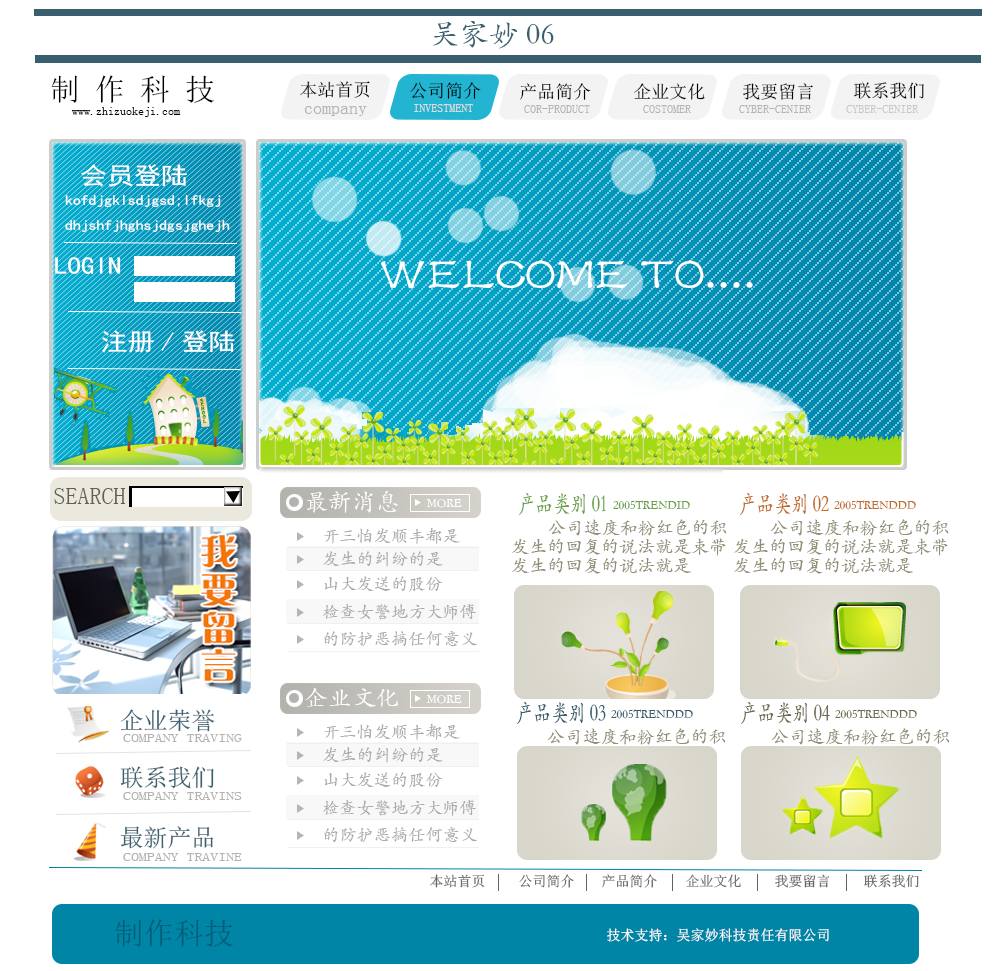
<style>
.page{position:relative;width:1005px;height:971px;background:#ffffff}
.page>*{position:absolute;margin:0}
.t1{font:30px "STKaiti";color:#395e6e}
.t2{font:30px "NSimSun";color:#000000}
.t3{font:18px "NSimSun";color:#000000}
.t4{font:12px "NSimSun";color:#000000}
.t5{font:18px "NSimSun";color:#b5b5b5}
.t6{font:12px "NSimSun";color:#dcdcdc}
.t7{font:12px "NSimSun";color:#b5b5b5}
.t8{font:12px "NSimSun";color:#c9c9c9}
.t9{font:24px "SimHei";color:#ffffff;scale:1.12 1}
.t10{font:14px "SimHei";color:#ffffff;scale:1.12 1}
.t11{font:48px "FZSTK--GBK1-0";color:#ffffff}
.t12{font:24px "SimSun";color:#615f52}
.t13{font:24px "STKaiti";color:#ffffff}
.t14{font:24.2px "STKaiti";color:#67a246;scale:0.72 1}
.t15{font:24.2px "STKaiti";color:#c16a27;scale:0.72 1}
.t16{font:12px "STKaiti";color:#ffffff}
.t17{font:12px "STKaiti";color:#67a246}
.t18{font:12px "STKaiti";color:#c16a27}
.t19{font:18px "STKaiti";color:#928d77}
.t20{font:17.4px "STKaiti";color:#aaaaaa}
.t21{font:24.2px "STKaiti";color:#395e6e;scale:0.72 1}
.t22{font:24.2px "STKaiti";color:#706b4e;scale:0.72 1}
.t23{font:24px "SimSun";color:#3a5f6f}
.t24{font:12px "STKaiti";color:#395e6e}
.t25{font:12px "STKaiti";color:#706b4e}
.t26{font:12px "SimSun";color:#b4b3ae;scale:1.33 1}
.t27{font:14px "SimSun";color:#626262}
.t28{font:30px "SimSun";color:#025e77}
.t29{font:14px "SimSun";color:#ffffff}
</style>
<div class="page">
<p class="t1" style="left:433px;top:21px;width:121px;height:28px">吴家妙06</p>
<p class="t2" style="left:51px;top:75px;width:163px;height:28px">制 作 科 技</p>
<p class="t3" style="left:300px;top:81px;width:70px;height:17px">本站首页</p>
<p class="t3" style="left:410px;top:82px;width:71px;height:17px">公司简介</p>
<p class="t3" style="left:520px;top:83px;width:71px;height:17px">产品简介</p>
<p class="t3" style="left:634px;top:83px;width:71px;height:17px">企业文化</p>
<p class="t3" style="left:743px;top:83px;width:70px;height:17px">我要留言</p>
<p class="t3" style="left:854px;top:82px;width:70px;height:17px">联系我们</p>
<p class="t4" style="left:71px;top:107px;width:110px;height:10px">www.zhizuokeji.com</p>
<p class="t5" style="left:304px;top:106px;width:63px;height:10px">company</p>
<p class="t6" style="left:414px;top:104px;width:59px;height:8px">INVESTMENT</p>
<p class="t7" style="left:524px;top:105px;width:66px;height:8px">COR-PRODUCT</p>
<p class="t7" style="left:643px;top:105px;width:48px;height:8px">COSTOMER</p>
<p class="t7" style="left:739px;top:105px;width:72px;height:8px">CYBER-CENIER</p>
<p class="t8" style="left:846px;top:105px;width:73px;height:8px">CYBER-CENIER</p>
<p class="t9" style="left:81px;top:164px;width:106px;height:23px">会员登陆</p>
<p class="t10" style="left:65px;top:195px;width:165px;height:37px">kofdjgklsdjgsd;lfkgj<br>dhjshfjhghsjdgsjghejh</p>
<p class="t9" style="left:55px;top:257px;width:66px;height:17px">LOGIN</p>
<p class="t11" style="left:381px;top:260px;width:372px;height:29px">WELCOME TO....</p>
<p class="t9" style="left:102px;top:330px;width:133px;height:23px">注册/登陆</p>
<p class="t12" style="left:54px;top:488px;width:72px;height:16px">SEARCH</p>
<p class="t13" style="left:307px;top:491px;width:91px;height:22px">最新消息</p>
<p class="t14" style="left:519px;top:493px;width:87px;height:22px">产品类别01</p>
<p class="t15" style="left:740px;top:493px;width:89px;height:22px">产品类别02</p>
<p class="t16" style="left:426px;top:499px;width:36px;height:9px">MORE</p>
<p class="t17" style="left:613px;top:500px;width:77px;height:10px">2005TRENDID</p>
<p class="t18" style="left:834px;top:500px;width:82px;height:10px">2005TRENDDD</p>
<p class="t19" style="left:548px;top:519px;width:179px;height:17px">公司速度和粉红色的积</p>
<p class="t19" style="left:770px;top:519px;width:179px;height:17px">公司速度和粉红色的积</p>
<p class="t20" style="left:324px;top:528px;width:136px;height:16px">开三怕发顺丰都是</p>
<p class="t19" style="left:512px;top:538px;width:214px;height:18px">发生的回复的说法就是束带</p>
<p class="t19" style="left:734px;top:538px;width:214px;height:18px">发生的回复的说法就是束带</p>
<p class="t20" style="left:323px;top:551px;width:120px;height:16px">发生的纠纷的是</p>
<p class="t19" style="left:512px;top:558px;width:179px;height:16px">发生的回复的说法就是</p>
<p class="t19" style="left:734px;top:558px;width:179px;height:16px">发生的回复的说法就是</p>
<p class="t20" style="left:324px;top:576px;width:119px;height:16px">山大发送的股份</p>
<p class="t20" style="left:323px;top:604px;width:153px;height:16px">检查女警地方大师傅</p>
<p class="t20" style="left:324px;top:631px;width:153px;height:15px">的防护恶搞任何意义</p>
<p class="t13" style="left:305px;top:688px;width:93px;height:19px">企业文化</p>
<p class="t16" style="left:426px;top:695px;width:36px;height:9px">MORE</p>
<p class="t21" style="left:517px;top:702px;width:89px;height:22px">产品类别03</p>
<p class="t22" style="left:741px;top:702px;width:89px;height:22px">产品类别04</p>
<p class="t23" style="left:120px;top:709px;width:95px;height:23px">企业荣誉</p>
<p class="t24" style="left:611px;top:709px;width:82px;height:10px">2005TRENDDD</p>
<p class="t25" style="left:835px;top:709px;width:82px;height:10px">2005TRENDDD</p>
<p class="t20" style="left:324px;top:724px;width:136px;height:16px">开三怕发顺丰都是</p>
<p class="t26" style="left:123px;top:734px;width:119px;height:8px">COMPANY TRAVING</p>
<p class="t19" style="left:547px;top:728px;width:179px;height:17px">公司速度和粉红色的积</p>
<p class="t19" style="left:771px;top:728px;width:179px;height:17px">公司速度和粉红色的积</p>
<p class="t20" style="left:323px;top:747px;width:120px;height:16px">发生的纠纷的是</p>
<p class="t23" style="left:120px;top:766px;width:94px;height:23px">联系我们</p>
<p class="t20" style="left:324px;top:772px;width:119px;height:16px">山大发送的股份</p>
<p class="t26" style="left:123px;top:792px;width:119px;height:8px">COMPANY TRAVINS</p>
<p class="t20" style="left:323px;top:800px;width:153px;height:16px">检查女警地方大师傅</p>
<p class="t23" style="left:120px;top:826px;width:94px;height:23px">最新产品</p>
<p class="t20" style="left:324px;top:827px;width:153px;height:15px">的防护恶搞任何意义</p>
<p class="t26" style="left:123px;top:853px;width:119px;height:8px">COMPANY TRAVINE</p>
<p class="t27" style="left:430px;top:874px;width:54px;height:14px">本站首页</p>
<p class="t27" style="left:519px;top:874px;width:55px;height:14px">公司简介</p>
<p class="t27" style="left:602px;top:874px;width:55px;height:14px">产品简介</p>
<p class="t27" style="left:686px;top:874px;width:55px;height:14px">企业文化</p>
<p class="t27" style="left:775px;top:874px;width:55px;height:14px">我要留言</p>
<p class="t27" style="left:864px;top:874px;width:55px;height:14px">联系我们</p>
<p class="t28" style="left:115px;top:919px;width:118px;height:28px">制作科技</p>
<p class="t29" style="left:607px;top:928px;width:222px;height:14px">技术支持：吴家妙科技责任有限公司</p>
</div>
